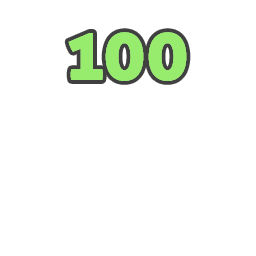
<style>
.page{position:relative;width:256px;height:256px;background:#ffffff}
.page>*{position:absolute;margin:0}
.t1{font:72px "AllerDisplay";color:#97ec6d}
</style>
<div class="page">
<p class="t1" style="left:68px;top:32px;width:119px;height:49px;opacity:0.75">100</p>
<p class="t1" style="left:68px;top:32px;width:119px;height:49px">100</p>
</div>
